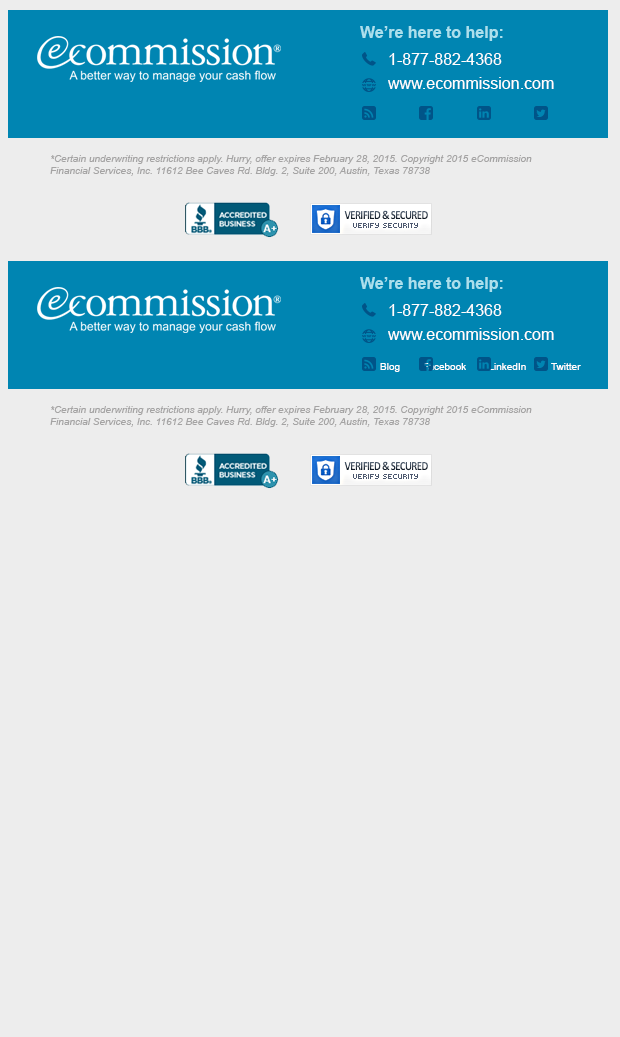
<style>
.page{position:relative;width:620px;height:1037px;background:#ededed}
.page>*{position:absolute;margin:0}
.t1{font:16px "Arial-BoldMT";color:#abe0ed}
.t2{font:16px/24px "ArialMT";color:#ffffff}
.t3{font:10px/12px "Arial-ItalicMT";color:#a5a4a4}
.t4{font:10px "ArialMT";color:#ffffff}
</style>
<div class="page">
<p class="t1" style="left:360px;top:26px;width:143px;height:15px">We’re here to help:</p>
<p class="t2" style="left:388px;top:53px;width:166px;height:36px">1-877-882-4368<br>www.ecommission.com</p>
<p class="t3" style="left:50px;top:155px;width:482px;height:21px">*Certain underwriting restrictions apply. Hurry, offer expires February 28, 2015. Copyright 2015 eCommission Financial Services, Inc. 11612 Bee Caves Rd. Bldg. 2, Suite 200, Austin, Texas 78738</p>
<p class="t1" style="left:360px;top:277px;width:143px;height:15px">We’re here to help:</p>
<p class="t2" style="left:388px;top:304px;width:166px;height:36px">1-877-882-4368<br>www.ecommission.com</p>
<p class="t4" style="left:380px;top:363px;width:201px;height:9px">Blog        Facebook        LinkedIn         Twitter</p>
<p class="t3" style="left:50px;top:406px;width:482px;height:21px">*Certain underwriting restrictions apply. Hurry, offer expires February 28, 2015. Copyright 2015 eCommission Financial Services, Inc. 11612 Bee Caves Rd. Bldg. 2, Suite 200, Austin, Texas 78738</p>
</div>
